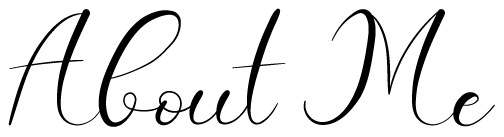
<style>
.page{position:relative;width:504px;height:137px;background:#ffffff}
.page>*{position:absolute;margin:0}
.t1{font:138.2px "LauliyaDemoRegular";color:#000000}
</style>
<div class="page">
<p class="t1" style="left:8px;top:8px;width:487px;height:119px">About Me</p>
</div>
